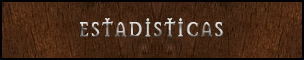
<style>
.page{position:relative;width:304px;height:60px}
.page>*{position:absolute;margin:0}
.t1{font:21.1px "Mason-Regular";letter-spacing:0.1em;font-weight:bold;scale:0.79 1}
</style>
<div class="page">
<p class="t1" style="left:80px;top:18px;width:143px;height:19px">ESTADISTICAS</p>
</div>
